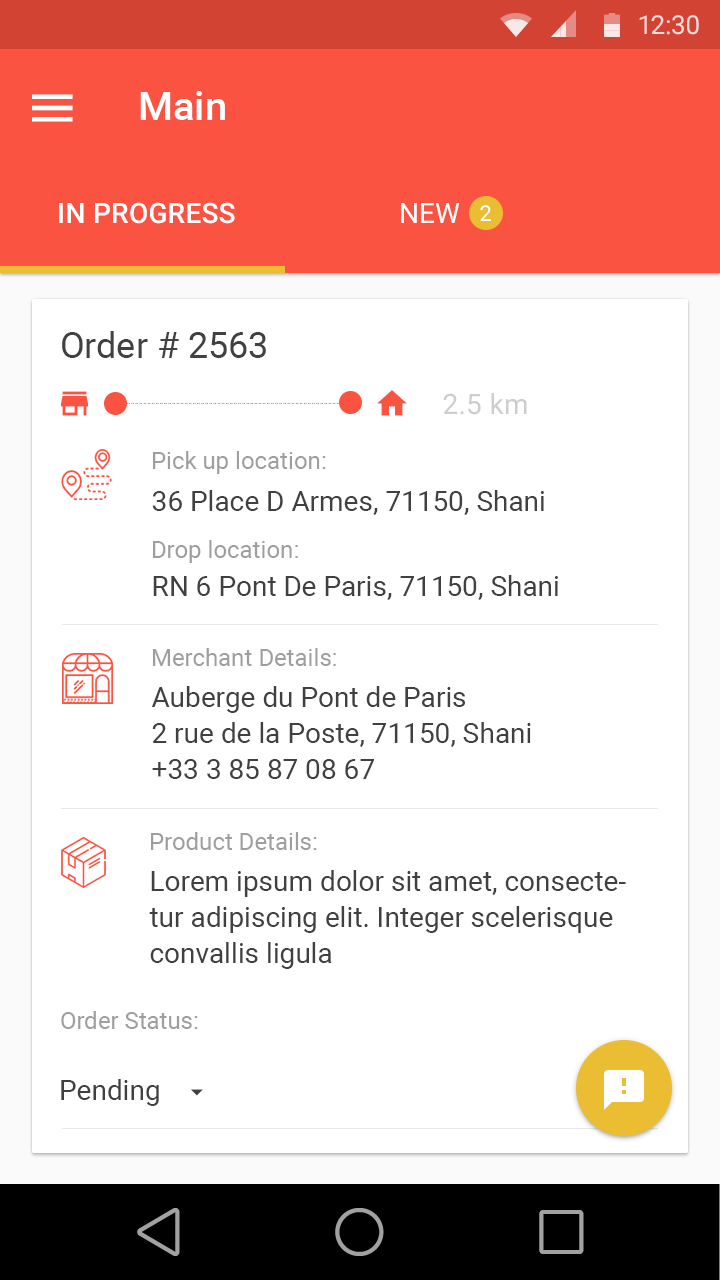
<style>
.page{position:relative;width:720px;height:1280px;background:#ffffff}
.page>*{position:absolute;margin:0}
.t1{font:40px "Roboto-Medium";color:#ffffff}
.t2{font:28px "Roboto-Medium";letter-spacing:0.01em;color:#ffffff;text-transform:uppercase}
.t3{font:28px "Roboto-Regular";letter-spacing:0.01em;color:#ffffff;text-transform:uppercase}
.t4{font:22px "Roboto-Regular";letter-spacing:0.01em;color:#ffffff;text-transform:uppercase}
.t5{font:36px "Roboto-Regular";color:#414141}
.t6{font:28px "Roboto-Regular";letter-spacing:0.01em;color:#cdcdcd;text-transform:uppercase}
.t7{font:28px "Roboto-Regular";letter-spacing:0.01em;color:#cdcdcd}
.t8{font:24px "Roboto-Regular";color:#9e9e9e}
.t9{font:28px "Roboto-Regular";color:#404040}
.t10{font:28px/36px "Roboto-Regular";color:#404040}
</style>
<div class="page">
<p class="t1" style="left:140px;top:91px;width:85px;height:29px">Main</p>
<p class="t2" style="left:59px;top:202px;width:176px;height:22px">in progress</p>
<p class="t3" style="left:401px;top:203px;width:59px;height:20px">New</p>
<p class="t4" style="left:480px;top:205px;width:11px;height:16px">2</p>
<p class="t5" style="left:62px;top:331px;width:204px;height:27px">Order # 2563</p>
<p class="t6" style="left:443px;top:393px;width:84px;height:22px">2.5 <span class="t7">km</span></p>
<p class="t8" style="left:153px;top:451px;width:173px;height:23px">Pick up location:</p>
<p class="t9" style="left:152px;top:490px;width:392px;height:25px">36 Place D Armes, 71150, Shani</p>
<p class="t8" style="left:153px;top:540px;width:145px;height:23px">Drop location:</p>
<p class="t9" style="left:153px;top:575px;width:405px;height:25px">RN 6 Pont De Paris, 71150, Shani</p>
<p class="t8" style="left:153px;top:648px;width:183px;height:18px">Merchant Details:</p>
<p class="t10" style="left:151px;top:686px;width:380px;height:93px">Auberge du Pont de Paris<br>2 rue de la Poste, 71150, Shani<br>+33 3 85 87 08 67</p>
<p class="t8" style="left:151px;top:832px;width:166px;height:18px">Product Details:</p>
<p class="t10" style="left:149px;top:870px;width:477px;height:99px">Lorem ipsum dolor sit amet, consectetur adipiscing elit. Integer scelerisque convallis ligula</p>
<p class="t8" style="left:61px;top:1011px;width:137px;height:18px">Order Status:</p>
<p class="t9" style="left:61px;top:1079px;width:98px;height:27px">Pending</p>
</div>
